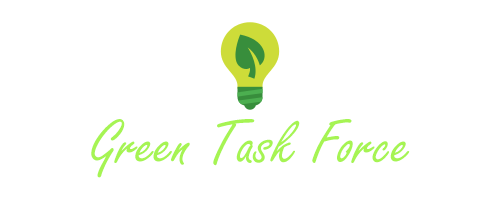
<style>
.page{position:relative;width:500px;height:200px;background:#ffffff}
.page>*{position:absolute;margin:0}
.t1{font:66.7px "FreestyleScript-Regular";color:#a6f453}
</style>
<div class="page">
<p class="t1" style="left:91px;top:119px;width:319px;height:59px">Green Task Force</p>
</div>
